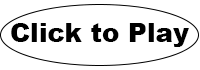
<style>
.page{position:relative;width:200px;height:70px;background:#ffffff}
.page>*{position:absolute;margin:0}
.t1{font:26px "Arial-Black";color:#000000}
</style>
<div class="page">
<p class="t1" style="left:11px;top:23px;width:178px;height:24px">Click to Play</p>
</div>
